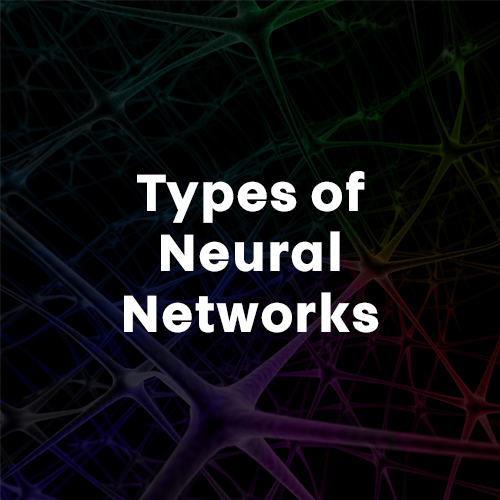
<style>
.page{position:relative;width:500px;height:500px;background:#000000}
.page>*{position:absolute;margin:0}
.t1{font:51.7px/60.4px "ToucheW03-Bold";letter-spacing:0.02em;color:#ffffff}
</style>
<div class="page">
<p class="t1" style="left:124px;top:171px;width:255px;height:162px;text-align:center">Types of<br>Neural<br>Networks</p>
</div>
